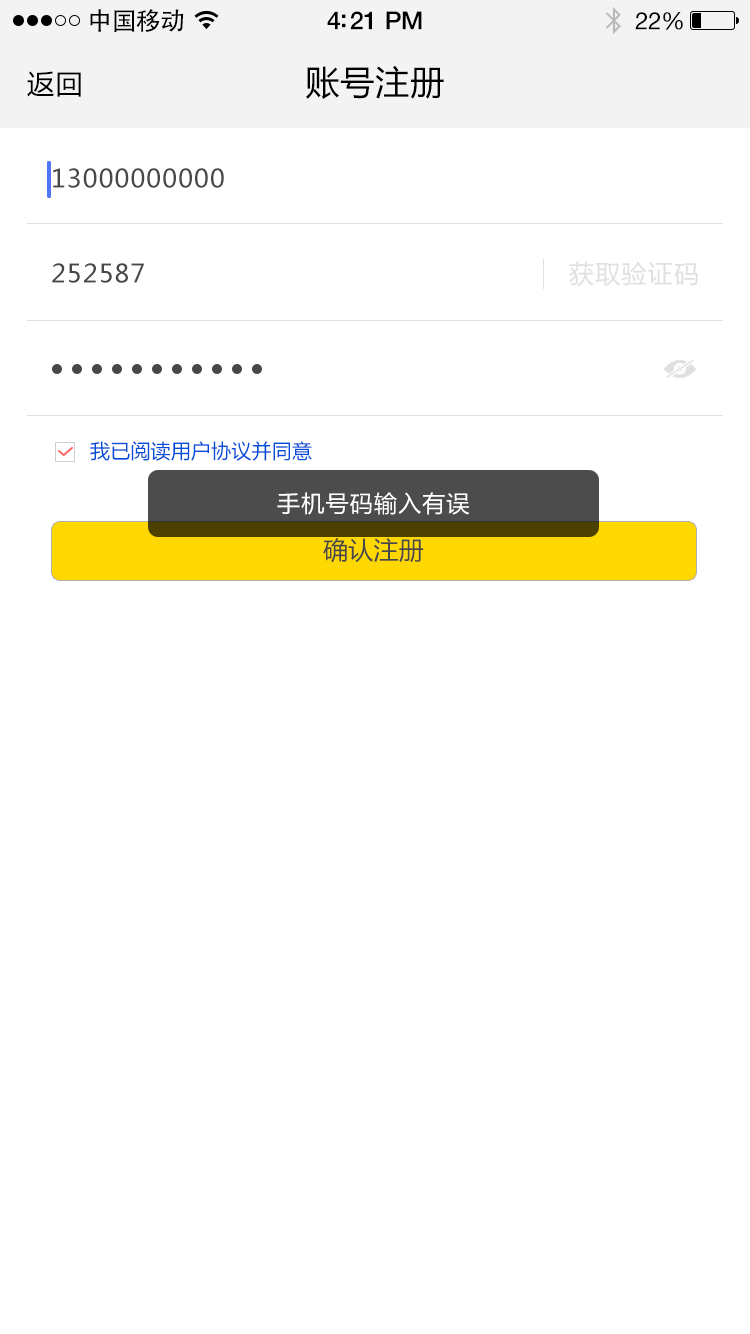
<style>
.page{position:relative;width:750px;height:1334px;background:#ffffff}
.page>*{position:absolute;margin:0}
.t1{font:25px "AdobeHeitiStd-Regular";letter-spacing:-0.025em;color:#000000}
.t2{font:25px "HelveticaNeue-Medium";letter-spacing:-0.02em;color:#000000}
.t3{font:24px "HelveticaNeue";letter-spacing:-0.02em;color:#000000}
.t4{font:34px "MicrosoftYaHei";letter-spacing:0.03em;color:#000000}
.t5{font:27px "MicrosoftYaHei";letter-spacing:0.05em;color:#000000}
.t6{font:25px "MicrosoftYaHei";letter-spacing:0.05em;color:#484848}
.t7{font:25px "MicrosoftYaHei";letter-spacing:0.05em;color:#e0e0e0}
.t8{font:20px "MicrosoftYaHei";letter-spacing:0.01em;color:#004dda}
.t9{font:23px "MicrosoftYaHei";letter-spacing:0.05em;color:#ffffff}
.t10{font:25px "MicrosoftYaHei";letter-spacing:0.01em;color:#555555}
</style>
<div class="page">
<p class="t1" style="left:90px;top:9px;width:94px;height:23px">中国移动</p>
<p class="t2" style="left:327px;top:11px;width:95px;height:19px">4:21 PM</p>
<p class="t3" style="left:635px;top:12px;width:48px;height:18px">22%</p>
<p class="t4" style="left:306px;top:65px;width:138px;height:34px">账号注册</p>
<p class="t5" style="left:27px;top:71px;width:54px;height:26px">返回</p>
<p class="t6" style="left:53px;top:168px;width:171px;height:20px">13000000000</p>
<p class="t6" style="left:52px;top:263px;width:92px;height:20px">252587</p>
<p class="t7" style="left:569px;top:261px;width:129px;height:25px">获取验证码</p>
<p class="t8" style="left:90px;top:441px;width:222px;height:20px">我已阅读用户协议并同意</p>
<p class="t9" style="left:277px;top:492px;width:193px;height:23px">手机号码输入有误</p>
<p class="t10" style="left:323px;top:538px;width:101px;height:25px">确认注册</p>
</div>
